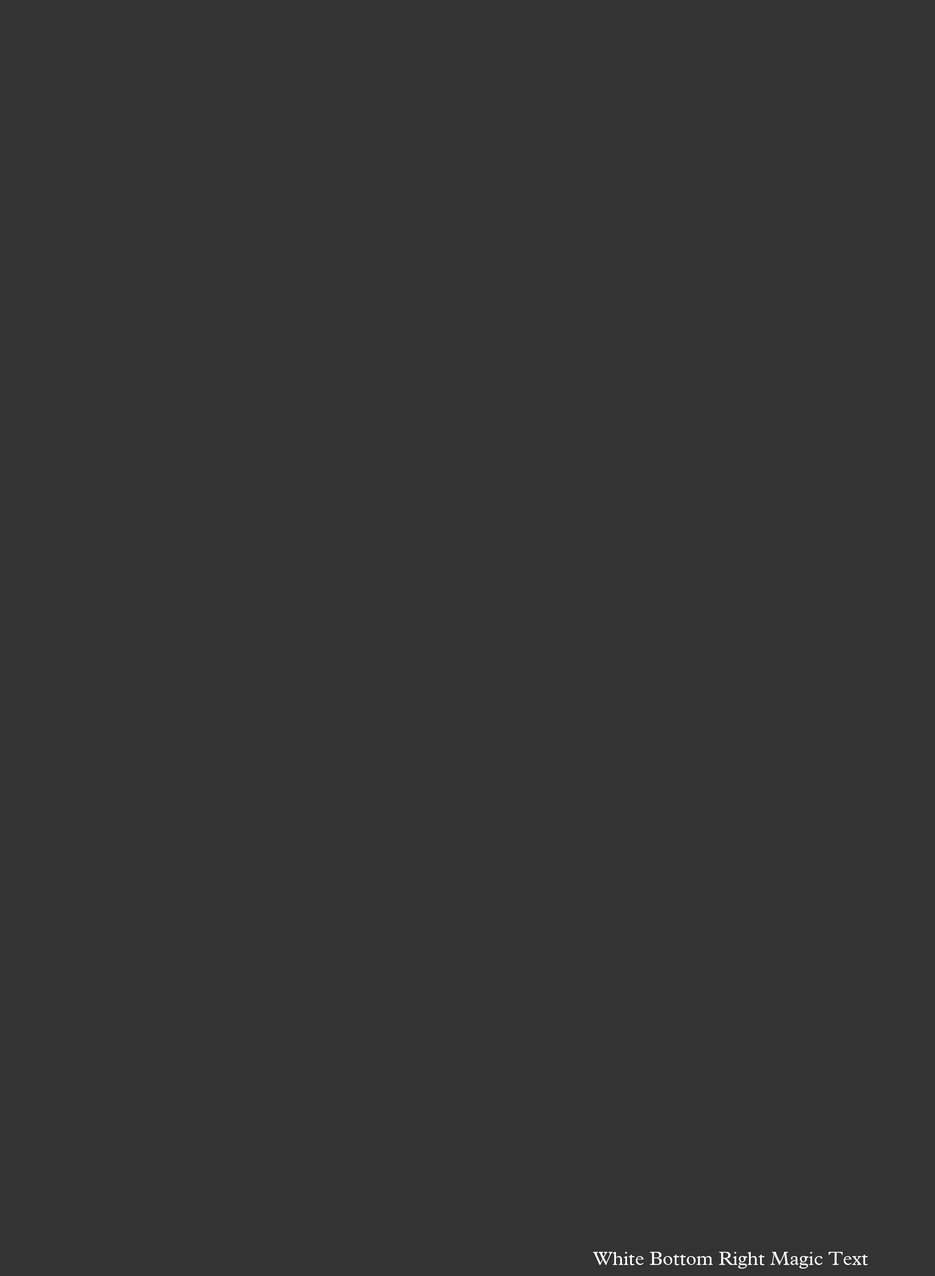
<style>
.page{position:relative;width:935px;height:1276px;background:#333333}
.page>*{position:absolute;margin:0}
.t1{font:19.3px "MPlantin";color:#ffffff}
</style>
<div class="page">
<p class="t1" style="left:593px;top:1252px;width:274px;height:16px">White Bottom Right Magic Text</p>
</div>
